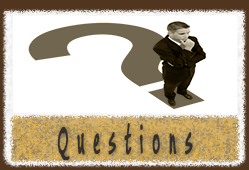
<style>
.page{position:relative;width:249px;height:170px;background:#ffffff}
.page>*{position:absolute;margin:0}
.t1{font:44.2px "BuxtonSketch";letter-spacing:0.5em;color:#322f2f;font-weight:bold;scale:0.38 1}
</style>
<div class="page">
<p class="t1" style="left:57px;top:123px;width:136px;height:38px">Questions</p>
</div>
